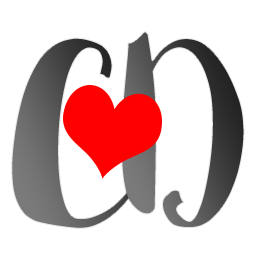
<style>
.page{position:relative;width:256px;height:256px;background:#ffffff}
.page>*{position:absolute;margin:0}
.t1{font:260px "Sophia";letter-spacing:-0.01em;color:#ffffff}
</style>
<div class="page">
<p class="t1" style="left:11px;top:37px;width:131px;height:192px">C</p>
<p class="t1" style="left:121px;top:31px;width:124px;height:197px">D</p>
</div>
